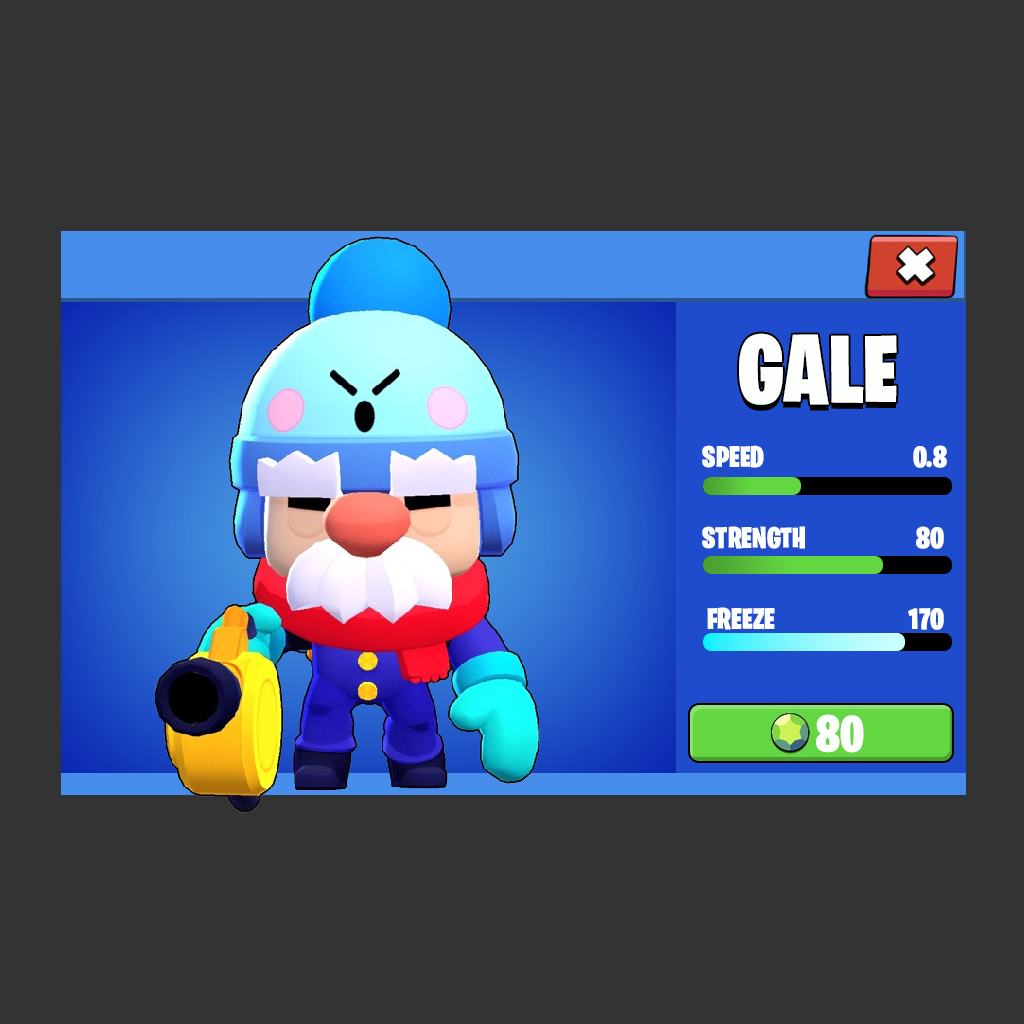
<style>
.page{position:relative;width:1024px;height:1024px;background:#333333}
.page>*{position:absolute;margin:0}
.t1{font:97.7px "BurbankBigCondensed-Black";color:#fdfffd}
.t2{font:30px "BurbankBigCondensed-Black";color:#fdfffd}
.t3{font:51px "BurbankBigCondensed-Black";color:#fdfffd}
</style>
<div class="page">
<p class="t1" style="left:739px;top:333px;width:158px;height:72px">GALE</p>
<p class="t2" style="left:702px;top:445px;width:62px;height:23px">SPEED</p>
<p class="t2" style="left:913px;top:445px;width:34px;height:23px">0.8</p>
<p class="t2" style="left:702px;top:526px;width:103px;height:23px">STRENGTH</p>
<p class="t2" style="left:916px;top:526px;width:28px;height:23px">80</p>
<p class="t2" style="left:707px;top:607px;width:68px;height:23px">FREEZE</p>
<p class="t2" style="left:908px;top:608px;width:36px;height:22px">1700</p>
<p class="t3" style="left:816px;top:714px;width:48px;height:39px">80</p>
</div>
